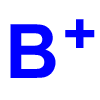
<style>
.page{position:relative;width:100px;height:100px;background:#ffffff}
.page>*{position:absolute;margin:0}
.t1{font:75px "Arial-BoldMT";color:#0000ff}
.t2{font:58.3px "Arial-BoldMT";color:#0000ff}
</style>
<div class="page">
<p class="t1" style="left:10px;top:24px;width:46px;height:54px">B</p>
<p class="t2" style="left:65px;top:19px;width:30px;height:29px">+</p>
</div>
